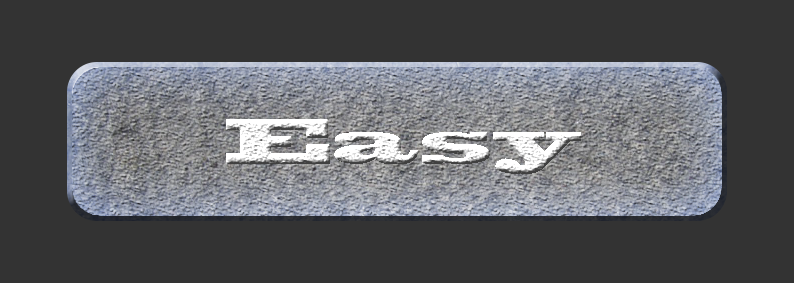
<style>
.page{position:relative;width:794px;height:283px;background:#333333}
.page>*{position:absolute;margin:0}
.t1{font:60px "BlackoakStd"}
</style>
<div class="page">
<p class="t1" style="left:226px;top:119px;width:355px;height:55px">Easy</p>
</div>
